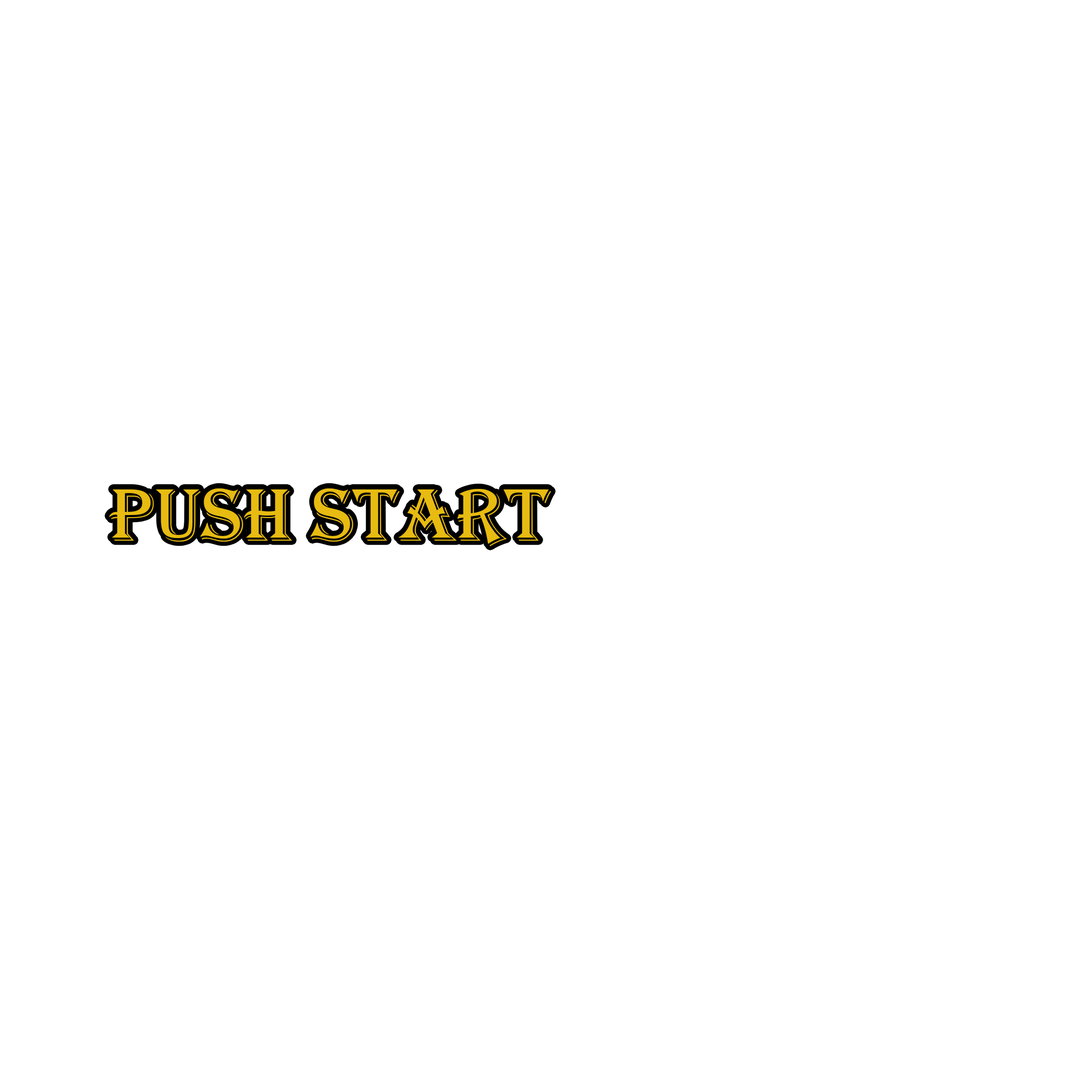
<style>
.page{position:relative;width:1092px;height:1092px;background:#ffffff}
.page>*{position:absolute;margin:0}
.t1{font:76.8px "Algerian";color:#e7bb11}
</style>
<div class="page">
<p class="t1" style="left:109px;top:488px;width:442px;height:58px">PUSH START</p>
</div>
